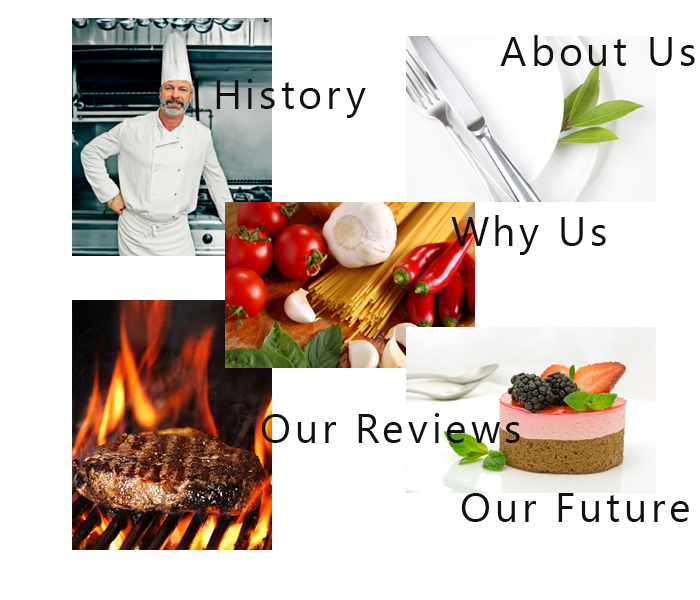
<style>
.page{position:relative;width:700px;height:600px;background:#ffffff}
.page>*{position:absolute;margin:0}
.t1{font:40.7px "Gadugi";letter-spacing:0.1em;color:#111111}
</style>
<div class="page">
<p class="t1" style="left:500px;top:35px;width:195px;height:31px">About Us</p>
<p class="t1" style="left:216px;top:79px;width:150px;height:39px">History</p>
<p class="t1" style="left:451px;top:215px;width:155px;height:40px">Why Us</p>
<p class="t1" style="left:261px;top:413px;width:259px;height:30px">Our Reviews</p>
<p class="t1" style="left:461px;top:493px;width:228px;height:29px">Our Future</p>
</div>
